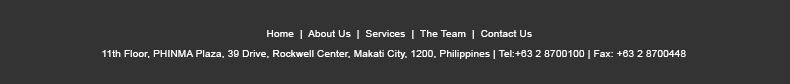
<style>
.page{position:relative;width:790px;height:84px;background:#333333}
.page>*{position:absolute;margin:0}
.t1{font:10px "ArialMT";letter-spacing:0.02em;color:#ffffff}
</style>
<div class="page">
<p class="t1" style="left:267px;top:30px;width:265px;height:9px">Home  |  About Us  |  Services  |  The Team  |  Contact Us</p>
<p class="t1" style="left:102px;top:50px;width:584px;height:9px">11th Floor, PHINMA Plaza, 39 Drive, Rockwell Center, Makati City, 1200, Philippines | Tel:+63 2 8700100 | Fax: +63 2 8700448</p>
</div>
